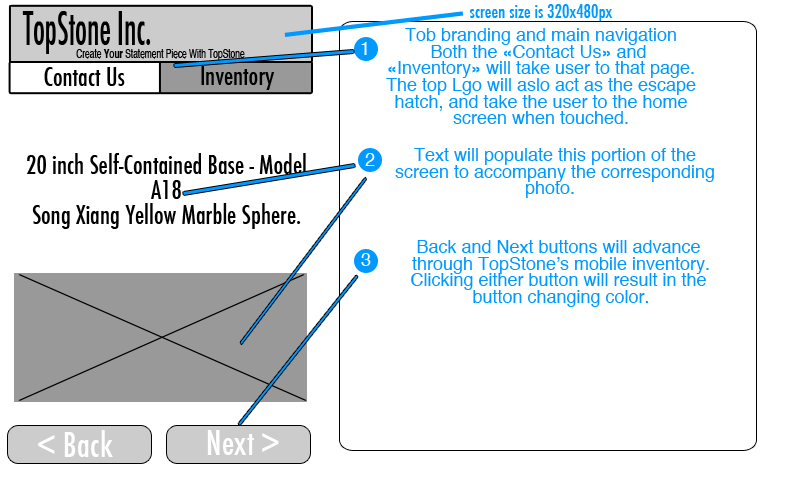
<style>
.page{position:relative;width:800px;height:480px;background:#ffffff}
.page>*{position:absolute;margin:0}
.t1{font:18px "Futura-CondensedMedium";color:#0099ff}
.t2{font:45.8px "Futura-CondensedMedium";color:#000000;scale:0.67 1}
.t3{font:18px/16.7px "Helvetica";color:#0099ff}
.t4{font:12.5px "Helvetica";color:#000000;scale:0.67 1}
.t5{font:12.5px "Helvetica-Bold";color:#000000;scale:0.67 1}
.t6{font:18px "Helvetica";color:#ffffff}
.t7{font:25px "Futura-CondensedMedium";color:#000000}
.t8{font:25px/25px "Futura-CondensedMedium";color:#000000}
.t9{font:33.3px "Futura-CondensedMedium";color:#ffffff}
</style>
<div class="page">
<p class="t1" style="left:469px;top:4px;width:144px;height:18px">screen size is 320x480px</p>
<p class="t2" style="left:22px;top:11px;width:129px;height:43px">TopStone Inc.</p>
<p class="t3" style="left:386px;top:28px;width:310px;height:96px;text-align:center">Tob branding and main navigation<br>Both the «Contact Us» and <br>«Inventory» will take user to that page.<br>The top Lgo will aslo act as the escape<br>hatch, and take the user to the home<br>screen when touched.</p>
<p class="t4" style="left:76px;top:49px;width:169px;height:12px">Create <span class="t5">Your</span> Statement Piece With TopStone</p>
<p class="t6" style="left:361px;top:42px;width:6px;height:13px">1</p>
<p class="t7" style="left:44px;top:67px;width:81px;height:19px">Contact Us</p>
<p class="t7" style="left:201px;top:66px;width:74px;height:24px">Inventory</p>
<p class="t3" style="left:395px;top:148px;width:319px;height:50px;text-align:center">Text will populate this portion of the<br>screen to accompany the corresponding<br>photo.</p>
<p class="t8" style="left:26px;top:153px;width:280px;height:76px;text-align:center">20 inch Self-Contained Base - Model A18 <br>Song Xiang Yellow Marble Sphere.</p>
<p class="t6" style="left:365px;top:153px;width:10px;height:13px">2</p>
<p class="t3" style="left:411px;top:240px;width:298px;height:67px;text-align:center">Back and Next buttons will advance <br>through TopStone’s mobile inventory.<br>Clicking either button will result in the <br>button changing color.</p>
<p class="t6" style="left:361px;top:253px;width:10px;height:13px">3</p>
<p class="t9" style="left:38px;top:430px;width:75px;height:27px">&lt; Back</p>
<p class="t9" style="left:207px;top:430px;width:72px;height:25px">Next &gt;</p>
</div>
